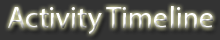
<style>
.page{position:relative;width:220px;height:40px;background:#333333}
.page>*{position:absolute;margin:0}
.t1{font:30px "MyriadPro-Regular";color:#ffffff}
</style>
<div class="page">
<p class="t1" style="left:8px;top:6px;width:205px;height:29px">Activity Timeline</p>
</div>
